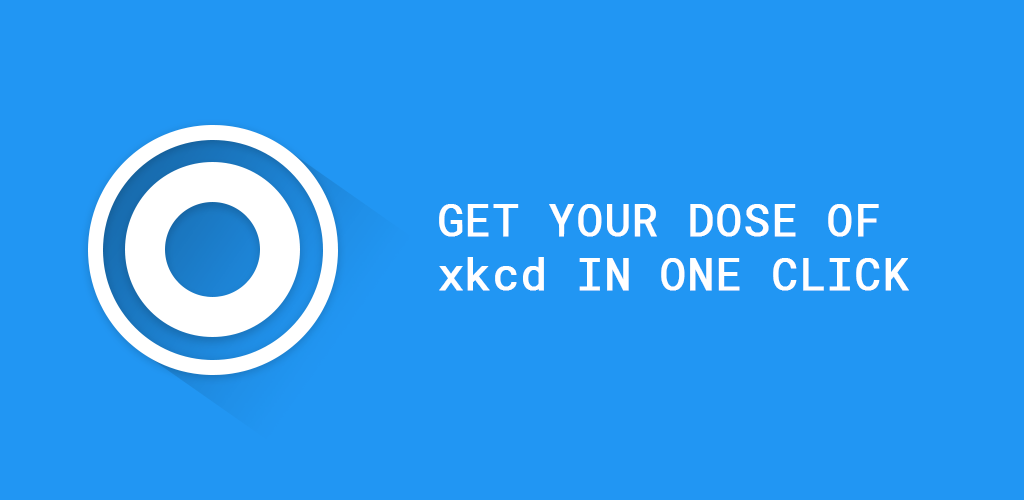
<style>
.page{position:relative;width:1024px;height:500px;background:#2196f3}
.page>*{position:absolute;margin:0}
.t1{font:44.4px "RobotoMono-Regular";color:#ffffff;font-weight:bold}
</style>
<div class="page">
<p class="t1" style="left:439px;top:204px;width:470px;height:87px">GET YOUR DOSE OF<br>xkcd IN ONE CLICK</p>
</div>
